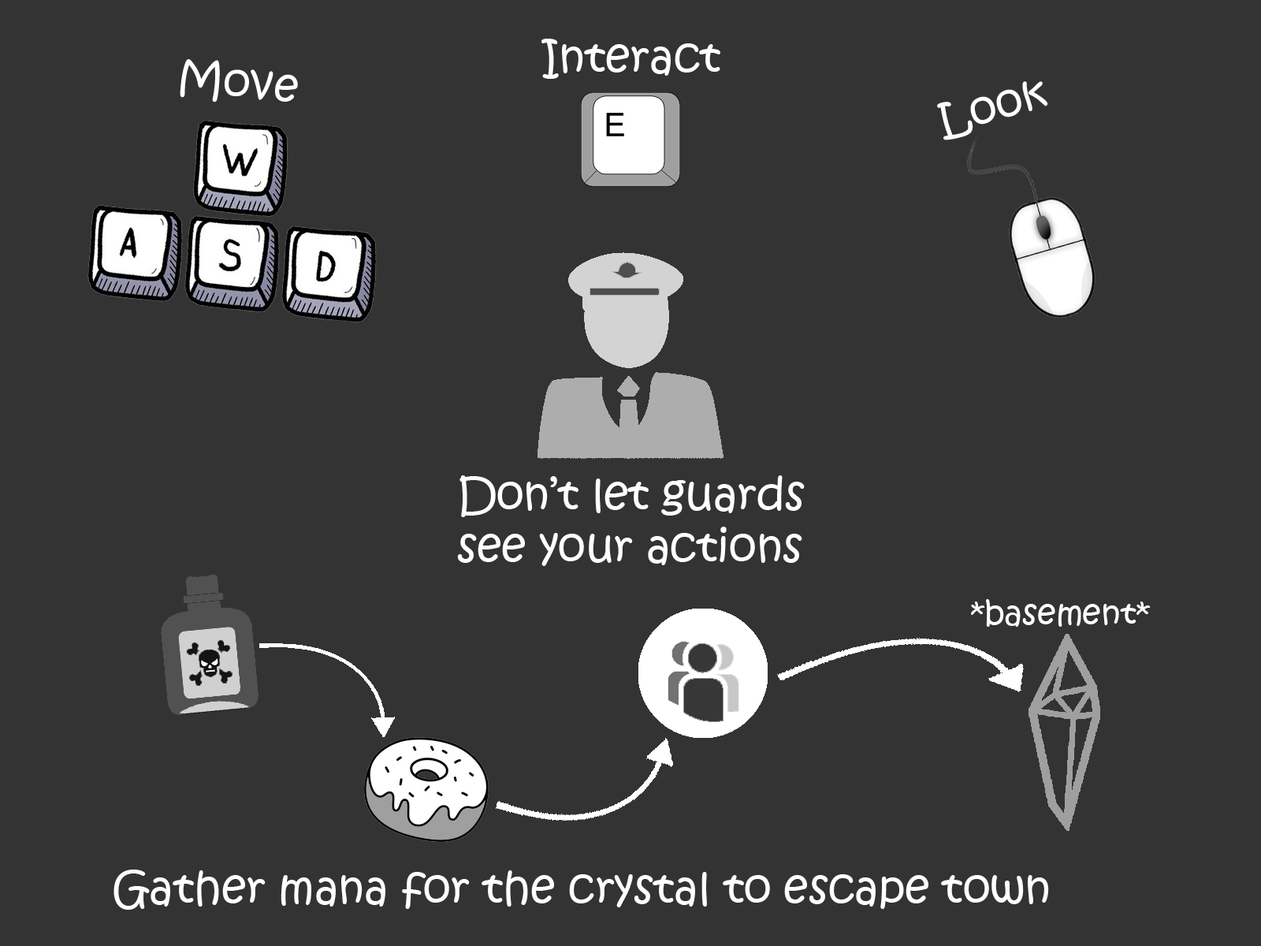
<style>
.page{position:relative;width:1261px;height:946px;background:#333333}
.page>*{position:absolute;margin:0}
.t1{font:43.8px "KristenITC-Regular";color:#ffffff}
.t2{font:32.8px "KristenITC-Regular";color:#ffffff}
</style>
<div class="page">
<p class="t1" style="left:541px;top:39px;width:179px;height:40px">Interact</p>
<p class="t1" style="left:180px;top:59px;width:118px;height:43px;rotate:5deg">Move</p>
<p class="t1" style="left:937px;top:81px;width:111px;height:59px;rotate:-15deg">Look</p>
<p class="t1" style="left:457px;top:475px;width:348px;height:91px">Don’t let guards<br>see your actions</p>
<p class="t2" style="left:971px;top:599px;width:180px;height:28px">*basement*</p>
<p class="t1" style="left:113px;top:869px;width:936px;height:40px">Gather mana for the crystal to escape town</p>
</div>
